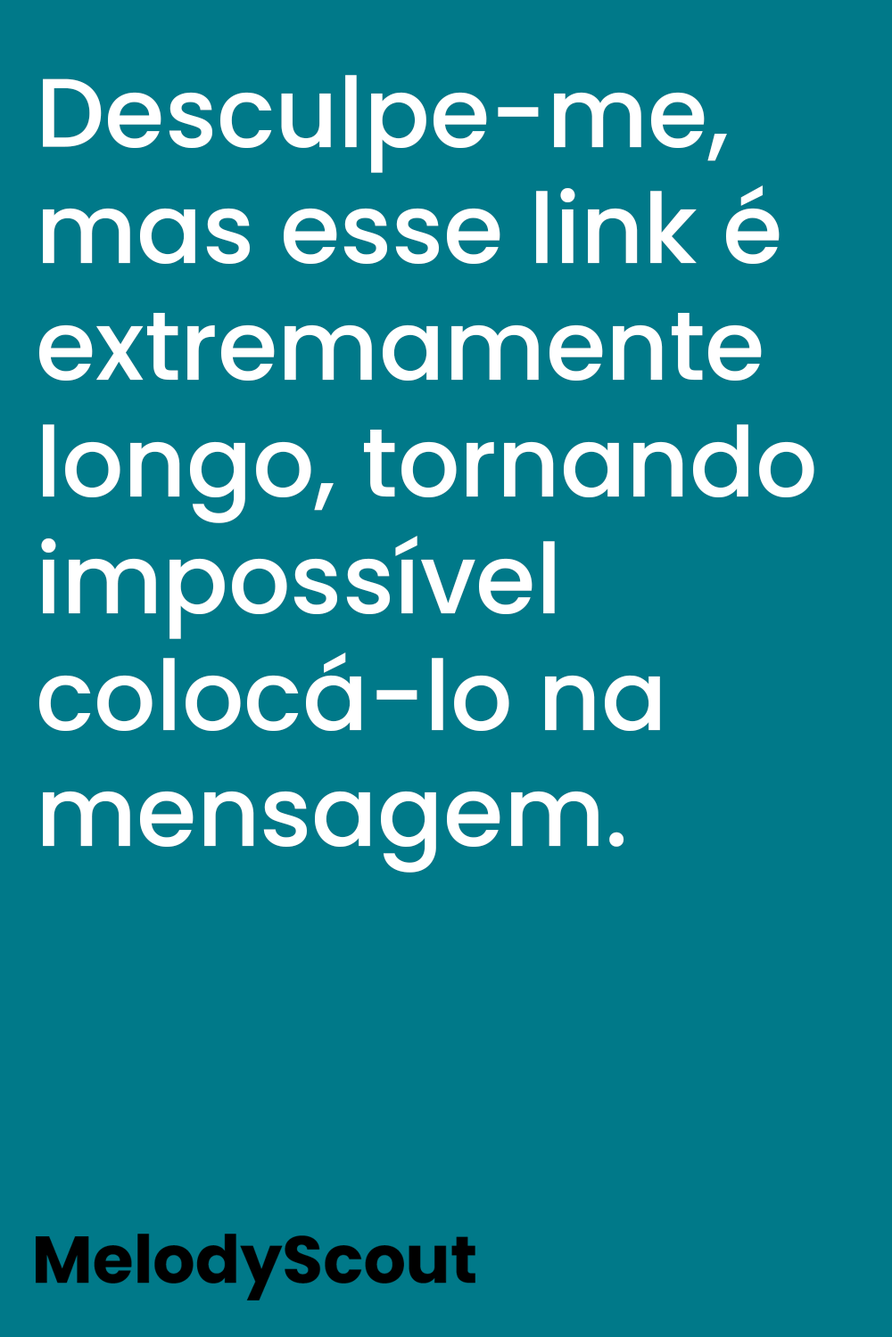
<style>
.page{position:relative;width:892px;height:1337px;background:#007989}
.page>*{position:absolute;margin:0}
.t1{font:97.2px "Poppins-Medium";color:#ffffff}
</style>
<div class="page">
<p class="t1" style="left:39px;top:75px;width:775px;height:798px">Desculpe-me, mas esse link é extremamente longo, tornando impossível colocá-lo na mensagem.</p>
</div>
